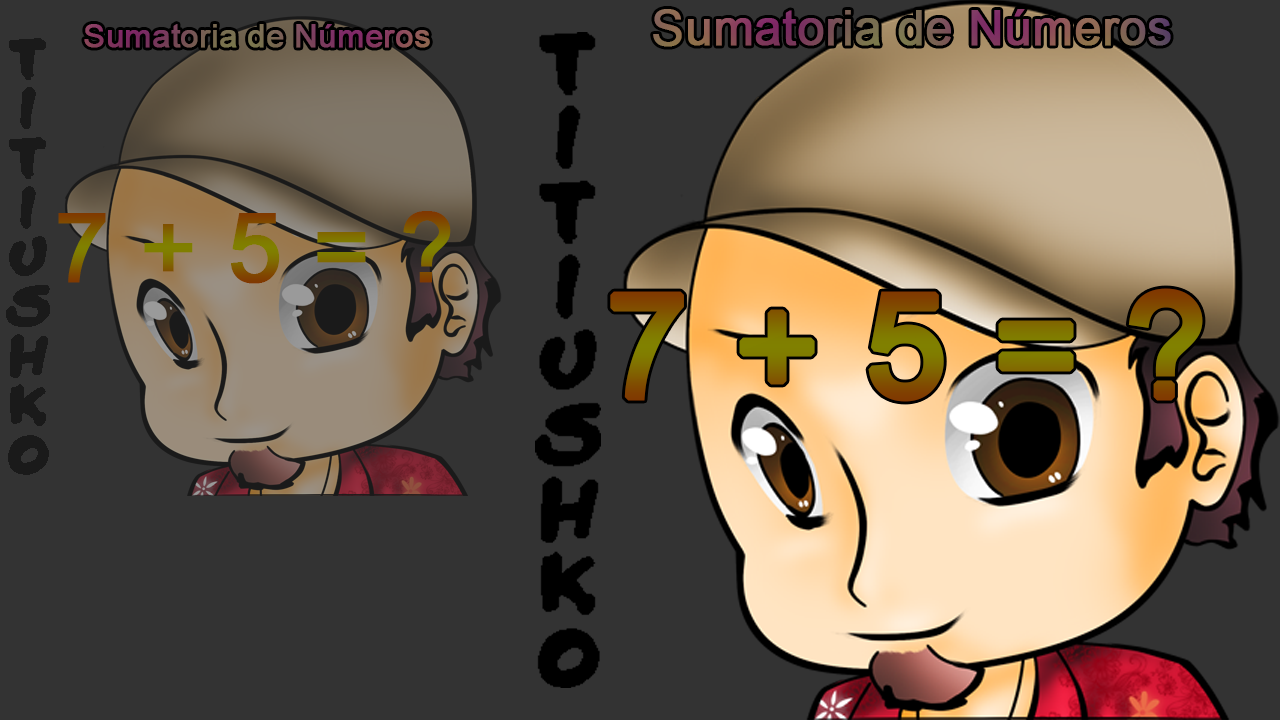
<style>
.page{position:relative;width:1280px;height:720px;background:#333333}
.page>*{position:absolute;margin:0}
.t1{font:48.3px "ArialMT";font-weight:bold}
.t2{font:32.1px "ArialMT";font-weight:bold}
.t3{font:95.5px "ArialMT";font-weight:bold}
.t4{font:143.5px "ArialMT";font-weight:bold}
</style>
<div class="page">
<p class="t1" style="left:653px;top:9px;width:518px;height:38px">Sumatoria de Números</p>
<p class="t2" style="left:84px;top:24px;width:346px;height:24px">Sumatoria de Números</p>
<p class="t3" style="left:58px;top:211px;width:393px;height:73px">7 + 5 = ?</p>
<p class="t4" style="left:610px;top:288px;width:593px;height:114px">7 + 5 = ?</p>
</div>
